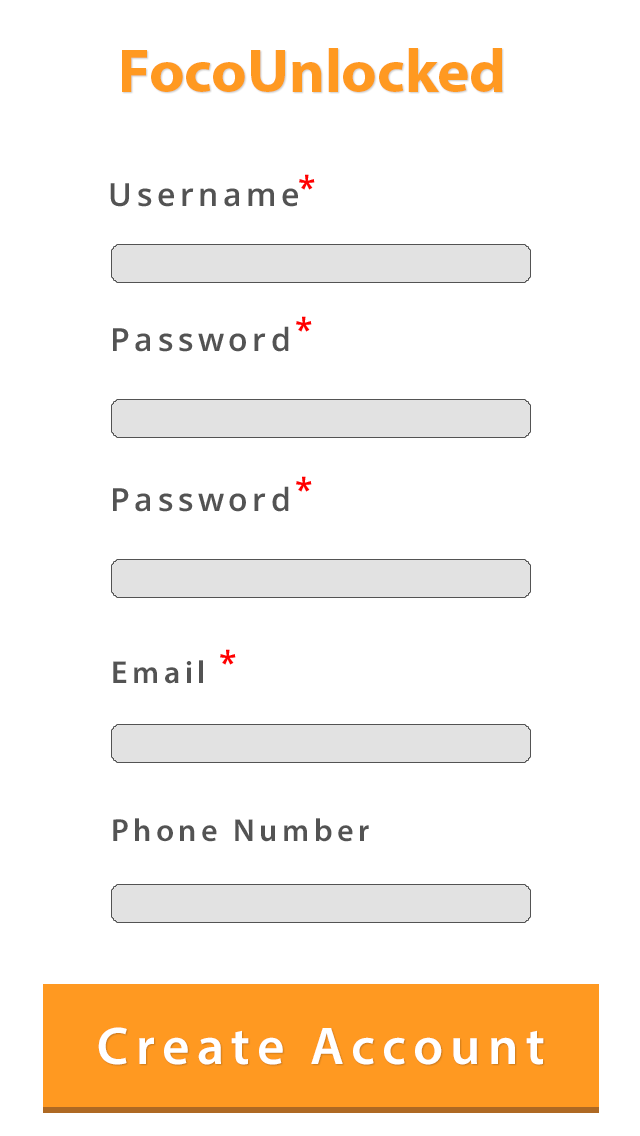
<style>
.page{position:relative;width:640px;height:1136px;background:#ffffff}
.page>*{position:absolute;margin:0}
.t1{font:61.3px "MyriadHebrew-Bold";color:#ff9921}
.t2{font:32px "OpenSans-Semibold";letter-spacing:0.14em;color:#ff0000}
.t3{font:32px "OpenSans-Semibold";letter-spacing:0.14em;color:#535353}
.t4{font:32px "MyriadPro-Semibold";letter-spacing:0.14em;color:#535353}
.t5{font:53.3px "MyriadPro-Semibold";letter-spacing:0.14em;color:#ffffff}
</style>
<div class="page">
<p class="t1" style="left:122px;top:48px;width:381px;height:44px">FocoUnlocked</p>
<p class="t2" style="left:299px;top:174px;width:16px;height:16px">*</p>
<p class="t3" style="left:110px;top:183px;width:188px;height:24px">Username</p>
<p class="t2" style="left:296px;top:316px;width:16px;height:16px">*</p>
<p class="t3" style="left:113px;top:326px;width:176px;height:26px">Password</p>
<p class="t3" style="left:113px;top:486px;width:176px;height:26px">Password</p>
<p class="t2" style="left:296px;top:476px;width:16px;height:16px">*</p>
<p class="t2" style="left:220px;top:649px;width:16px;height:16px">*</p>
<p class="t4" style="left:113px;top:660px;width:90px;height:24px">Email</p>
<p class="t4" style="left:113px;top:818px;width:256px;height:24px">Phone Number</p>
<p class="t5" style="left:98px;top:1027px;width:446px;height:38px">Create Account</p>
</div>
